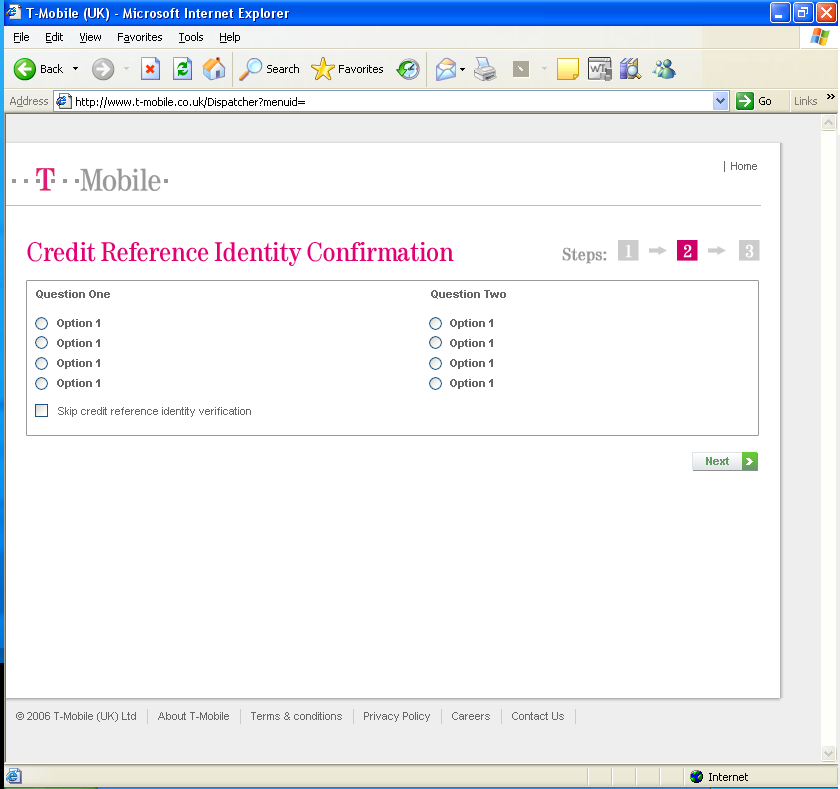
<style>
.page{position:relative;width:840px;height:789px;background:#ffffff}
.page>*{position:absolute;margin:0}
.t1{font:28px "Tele-Antiqua";color:#e20074}
.t2{font:18px "Tele-Antiqua";color:#ffffff;font-weight:bold}
.t3{font:18px "Tele-Antiqua";color:#999999;font-weight:bold}
.t4{font:11px "Arial-BoldMT";color:#666666}
.t5{font:11px/20px "Arial-BoldMT";color:#666666}
.t6{font:11px "ArialMT";color:#666666}
.t7{font:11px "Arial-BoldMT";color:#669a65}
</style>
<div class="page">
<p class="t1" style="left:27px;top:242px;width:427px;height:24px">Credit Reference Identity Confirmation</p>
<p class="t2" style="left:625px;top:244px;width:7px;height:14px">1</p>
<p class="t2" style="left:683px;top:244px;width:9px;height:14px">2</p>
<p class="t2" style="left:745px;top:244px;width:9px;height:14px">3</p>
<p class="t3" style="left:562px;top:247px;width:45px;height:17px">Steps:</p>
<p class="t4" style="left:36px;top:290px;width:74px;height:9px">Question One</p>
<p class="t4" style="left:431px;top:290px;width:75px;height:9px">Question Two</p>
<p class="t5" style="left:57px;top:319px;width:43px;height:70px">Option 1<br>Option 1<br>Option 1<br>Option 1</p>
<p class="t5" style="left:450px;top:319px;width:43px;height:70px">Option 1<br>Option 1<br>Option 1<br>Option 1</p>
<p class="t6" style="left:58px;top:407px;width:193px;height:10px">Skip credit reference identity verification</p>
<p class="t7" style="left:706px;top:457px;width:23px;height:8px">Next</p>
</div>
